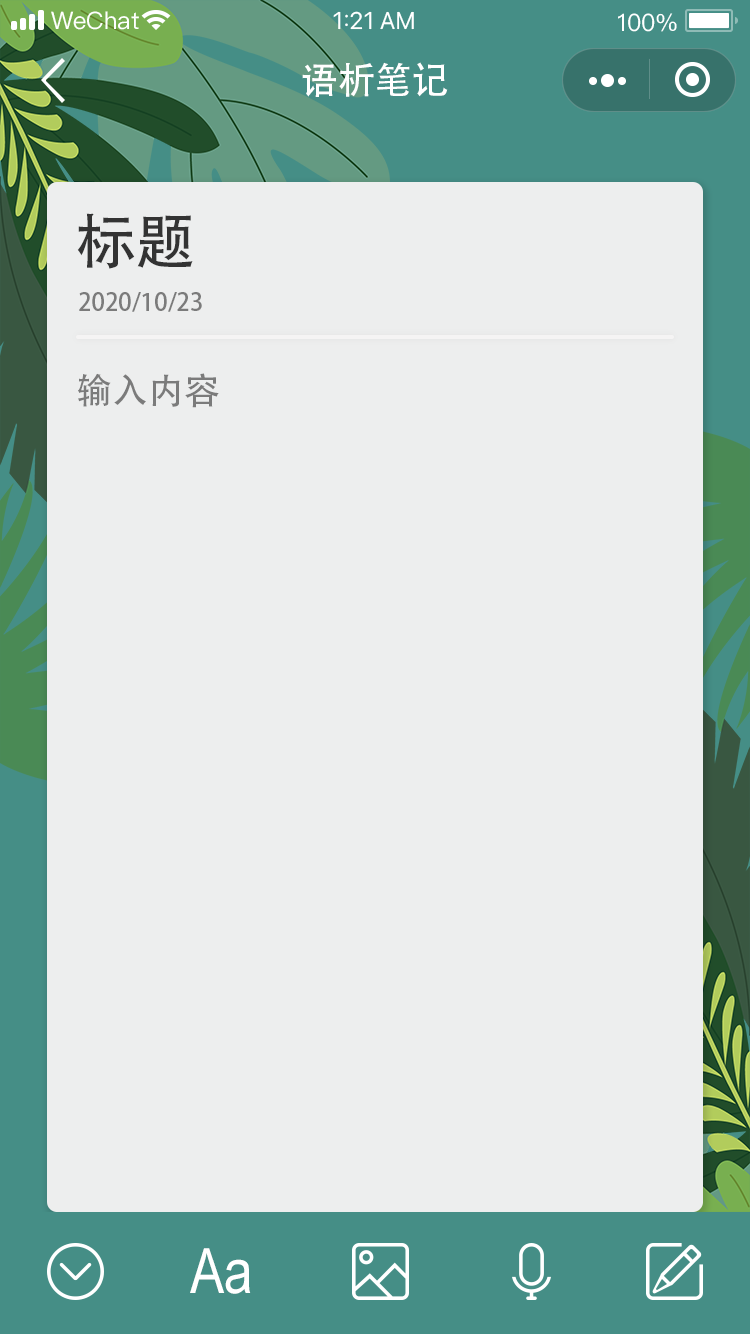
<style>
.page{position:relative;width:750px;height:1334px;background:#edeeee}
.page>*{position:absolute;margin:0}
.t1{font:37px "AdobeHeitiStd-Regular";color:#ffffff}
.t2{font:60px "AdobeHeitiStd-Regular";color:#333333}
.t3{font:24px "AdobeHeitiStd-Regular";color:#7b7b7b}
.t4{font:36px "AdobeHeitiStd-Regular";color:#7b7b7b}
.t5{font:62.6px "ArialNarrow";color:#ffffff}
</style>
<div class="page">
<p class="t1" style="left:302px;top:62px;width:146px;height:35px">语析笔记</p>
<p class="t2" style="left:77px;top:213px;width:116px;height:56px">标题</p>
<p class="t3" style="left:79px;top:292px;width:123px;height:20px">2020/10/23</p>
<p class="t4" style="left:78px;top:373px;width:141px;height:35px">输入内容</p>
<p class="t5" style="left:190px;top:1248px;width:61px;height:46px">Aa</p>
</div>
